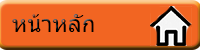
<style>
.page{position:relative;width:200px;height:50px;background:#f26522}
.page>*{position:absolute;margin:0}
.t1{font:22.9px "Tahoma"}
</style>
<div class="page">
<p class="t1" style="left:12px;top:14px;width:82px;height:18px">หน้าหลัก</p>
</div>
